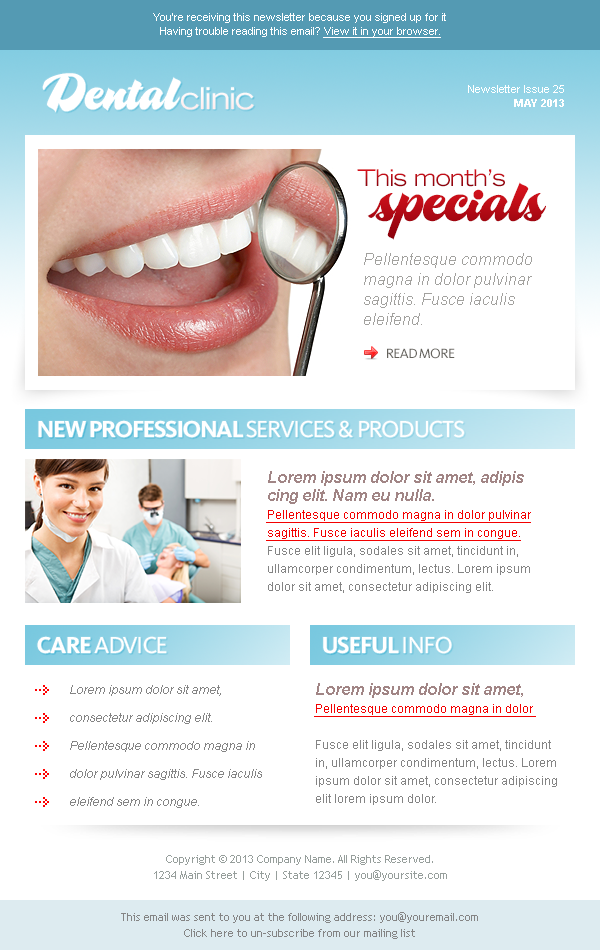
<style>
.page{position:relative;width:600px;height:950px;background:#ffffff}
.page>*{position:absolute;margin:0}
.t1{font:11px/14px "ArialMT";color:#ffffff}
.t2{font:11px/14px "ArialMT";color:#ffffff;text-decoration:underline}
.t3{font:50px "A&S-Motherlode";color:#ffffff}
.t4{font:30px "TradeGothicLT-Extended";letter-spacing:-0.04em;color:#ffffff}
.t5{font:11px/14px "Arial-BoldMT";color:#ffffff}
.t6{font:23px "TradeGothicLT-Extended";letter-spacing:-0.04em}
.t7{font:60px "A&S-Motherlode";color:#b50b15}
.t8{font:16px/20px "Arial-ItalicMT";color:#a2a19e}
.t9{font:14px "Kievit-Book";letter-spacing:-0.05em;color:#64625c;text-transform:uppercase}
.t10{font:24px "Kievit-Book";letter-spacing:-0.05em;color:#ffffff;text-transform:uppercase}
.t11{font:24px "Kievit-Bold";letter-spacing:-0.05em;color:#ffffff;text-transform:uppercase}
.t12{font:12px/18px "ArialMT";color:#848484}
.t13{font:16px/18px "Arial-BoldItalicMT";color:#a18585}
.t14{font:12px/18px "ArialMT";color:#f30000;text-decoration:underline}
.t15{font:12px/28px "Arial-ItalicMT";color:#848484}
.t16{font:11px/16px "TrebuchetMS";color:#969e9b}
.t17{font:11px/16px "TrebuchetMS";color:#848484}
</style>
<div class="page">
<p class="t1" style="left:153px;top:13px;width:293px;height:25px;text-align:center">You’re receiving this newsletter because you signed up for it <br>Having trouble reading this email? <span class="t2">View it in your browser.</span></p>
<p class="t3" style="left:42px;top:73px;width:139px;height:40px">Dental</p>
<p class="t4" style="left:181px;top:87px;width:73px;height:23px">clinic</p>
<p class="t1" style="left:468px;top:85px;width:96px;height:22px;text-align:right">Newsletter Issue 25<br><span class="t5">MAY 2013</span></p>
<p class="t6" style="left:357px;top:169px;width:148px;height:18px">This month’s</p>
<p class="t7" style="left:367px;top:182px;width:179px;height:58px">specials</p>
<p class="t8" style="left:364px;top:253px;width:168px;height:72px">Pellentesque commodo magna in dolor pulvinar sagittis. Fusce iaculis eleifend.</p>
<p class="t9" style="left:387px;top:348px;width:68px;height:11px">READ MORE</p>
<p class="t10" style="left:38px;top:420px;width:426px;height:18px"><span class="t11">NEW PROFESSIONAL </span>SERVICES &amp; PRODUCTS</p>
<p class="t12" style="left:266px;top:471px;width:265px;height:122px"><span class="t13">Lorem ipsum dolor sit amet, adipis cing elit. Nam eu nulla. <br></span><span class="t14">Pellentesque commodo magna in dolor pulvinar sagittis. Fusce iaculis eleifend sem in congue. </span>Fusce elit ligula, sodales sit amet, tincidunt in, ullamcorper condimentum, lectus. Lorem ipsum dolor sit amet, consectetur adipiscing elit.</p>
<p class="t10" style="left:37px;top:636px;width:130px;height:18px"><span class="t11">CARE </span>ADVICE</p>
<p class="t11" style="left:323px;top:636px;width:129px;height:18px">USEFUL <span class="t10">INFO</span></p>
<p class="t15" style="left:70px;top:685px;width:192px;height:123px">Lorem ipsum dolor sit amet, consectetur adipiscing elit. Pellentesque commodo magna in dolor pulvinar sagittis. Fusce iaculis eleifend sem in congue.</p>
<p class="t12" style="left:314px;top:683px;width:243px;height:122px"><span class="t13">Lorem ipsum dolor sit amet, <br></span><span class="t14">Pellentesque commodo magna in dolor <br><br></span>Fusce elit ligula, sodales sit amet, tincidunt in, ullamcorper condimentum, lectus. Lorem ipsum dolor sit amet, consectetur adipiscing elit lorem ipsum dolor.</p>
<p class="t16" style="left:154px;top:855px;width:293px;height:26px;text-align:center">Copyright © 2013 Company Name. All Rights Reserved.<br>1234 Main Street | City | State 12345 | you@yoursite.com</p>
<p class="t17" style="left:121px;top:912px;width:357px;height:27px;text-align:center">This email was sent to you at the following address: you@youremail.com<br>Click here to un-subscribe from our mailing list</p>
</div>
